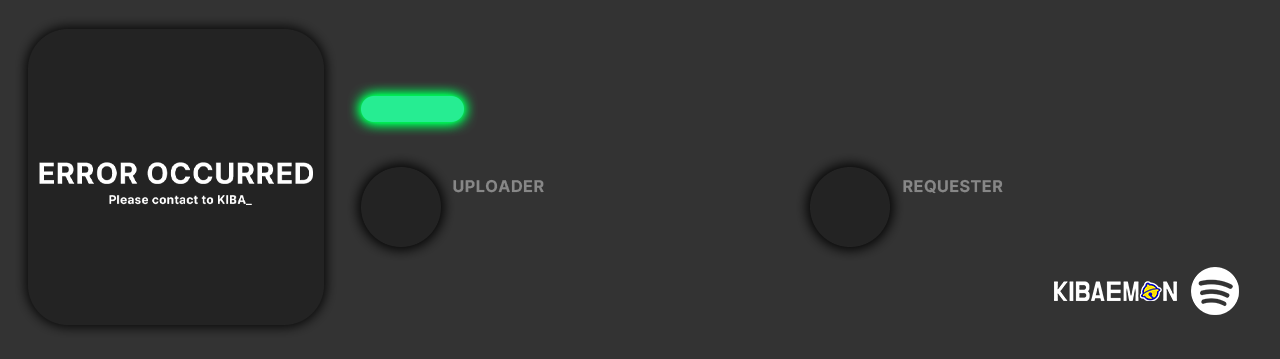
<style>
.page{position:relative;width:1280px;height:359px;background:#333333}
.page>*{position:absolute;margin:0}
.t1{font:29.7px "PretendardVariable-Bold";letter-spacing:0.03em;color:#ffffff}
.t2{font:16.7px "PretendardVariable-Bold";letter-spacing:0.03em;color:#878787}
.t3{font:12.1px "PretendardVariable-Bold";letter-spacing:0.03em;color:#ffffff}
</style>
<div class="page">
<p class="t1" style="left:39px;top:162px;width:274px;height:22px">ERROR OCCURRED</p>
<p class="t2" style="left:453px;top:179px;width:91px;height:14px">UPLOADER</p>
<p class="t2" style="left:903px;top:179px;width:100px;height:15px">REQUESTER</p>
<p class="t3" style="left:109px;top:195px;width:143px;height:10px">Please contact to KIBA_</p>
</div>
